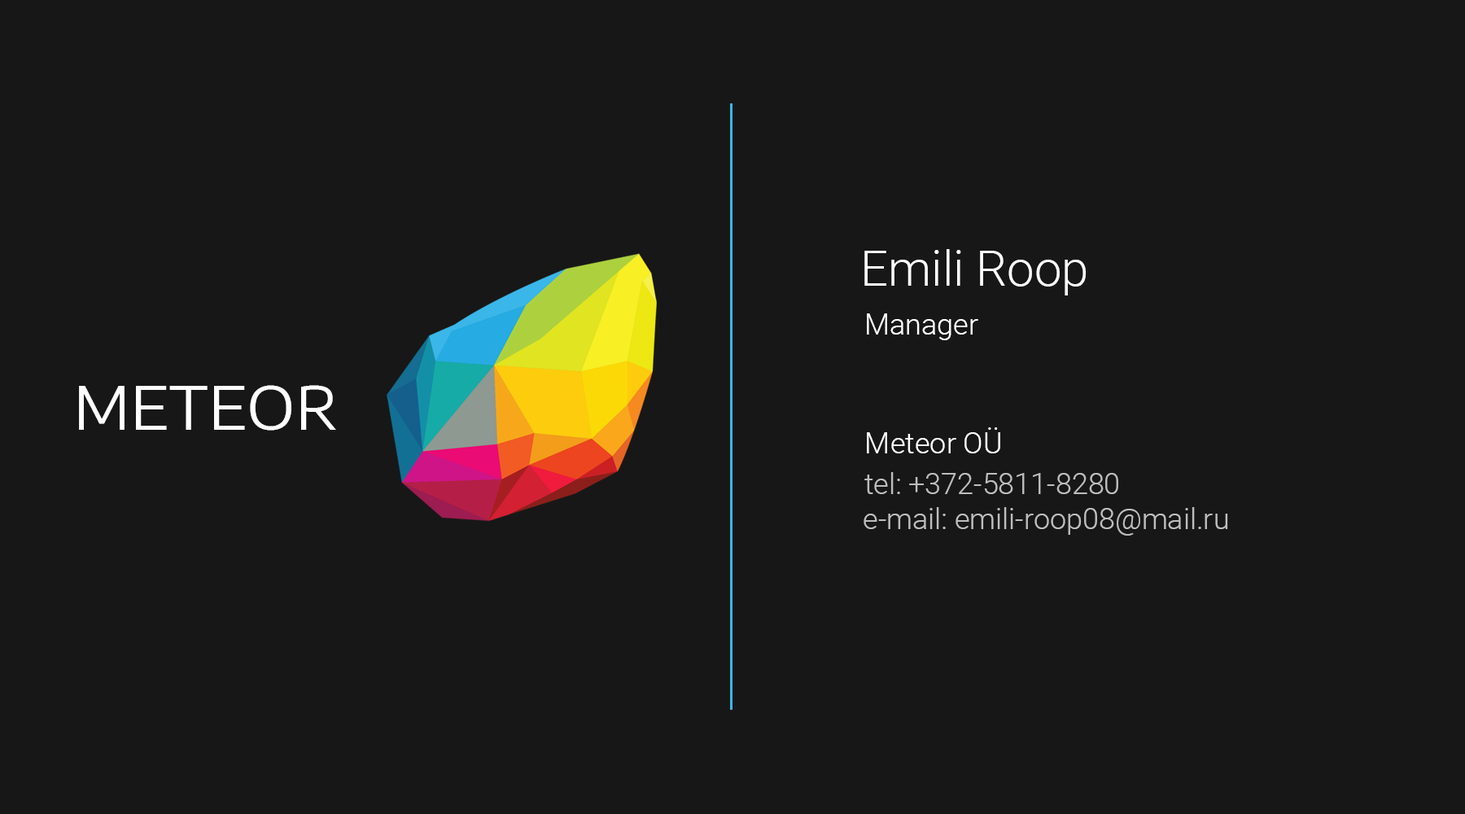
<style>
.page{position:relative;width:1465px;height:814px;background:#171717}
.page>*{position:absolute;margin:0}
.t1{font:48.8px "Roboto-Light";color:#ffffff}
.t2{font:29.3px "Roboto-Light";color:#ffffff}
.t3{font:58.6px "EncodeSansExpanded-Regular";color:#ffffff}
.t4{font:29.3px "Roboto-Light";color:#bebebe}
</style>
<div class="page">
<p class="t1" style="left:864px;top:249px;width:223px;height:46px">Emili Roop</p>
<p class="t2" style="left:867px;top:313px;width:111px;height:27px">Manager</p>
<p class="t3" style="left:79px;top:385px;width:257px;height:46px">METEOR</p>
<p class="t2" style="left:867px;top:427px;width:133px;height:26px">Meteor OÜ</p>
<p class="t4" style="left:864px;top:472px;width:254px;height:22px">tel: +372-5811-8280</p>
<p class="t4" style="left:864px;top:507px;width:364px;height:29px">e-mail: emili-roop08@mail.ru</p>
</div>
